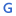
<style>
.page{position:relative;width:16px;height:16px;background:#ffffff}
.page>*{position:absolute;margin:0}
.t1{font:14px "SegoeUI-SemiBold";color:#3366cc}
</style>
<div class="page">
<p class="t1" style="left:3px;top:2px;width:9px;height:11px">G</p>
</div>
